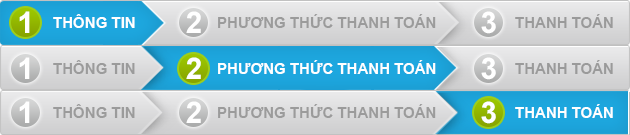
<style>
.page{position:relative;width:630px;height:135px}
.page>*{position:absolute;margin:0}
.t1{font:30px "Arial-BoldMT";color:#ffffff}
.t2{font:15px "Arial-BoldMT";color:#ffffff;text-transform:uppercase}
.t3{font:15px "Arial-BoldMT";color:#9b9b9b;text-transform:uppercase}
.t4{font:15px "Arial-BoldMT";color:#9a9a9a;text-transform:uppercase}
</style>
<div class="page">
<p class="t1" style="left:19px;top:11px;width:11px;height:22px">1</p>
<p class="t2" style="left:53px;top:14px;width:82px;height:14px">thông tin</p>
<p class="t1" style="left:186px;top:11px;width:15px;height:22px">2</p>
<p class="t3" style="left:218px;top:14px;width:218px;height:14px">Phương thức thanh toán</p>
<p class="t1" style="left:481px;top:11px;width:15px;height:23px">3</p>
<p class="t4" style="left:515px;top:14px;width:98px;height:14px">thanh toán</p>
<p class="t1" style="left:19px;top:57px;width:11px;height:22px">1</p>
<p class="t3" style="left:53px;top:60px;width:82px;height:14px">thông tin</p>
<p class="t1" style="left:186px;top:57px;width:15px;height:22px">2</p>
<p class="t2" style="left:218px;top:60px;width:218px;height:14px">Phương thức thanh toán</p>
<p class="t1" style="left:481px;top:57px;width:15px;height:23px">3</p>
<p class="t4" style="left:515px;top:60px;width:98px;height:14px">thanh toán</p>
<p class="t1" style="left:19px;top:101px;width:11px;height:22px">1</p>
<p class="t1" style="left:186px;top:101px;width:15px;height:22px">2</p>
<p class="t1" style="left:481px;top:101px;width:15px;height:23px">3</p>
<p class="t3" style="left:53px;top:104px;width:82px;height:14px">thông tin</p>
<p class="t3" style="left:218px;top:104px;width:218px;height:14px">Phương thức thanh toán</p>
<p class="t2" style="left:515px;top:104px;width:98px;height:14px">thanh toán</p>
</div>
